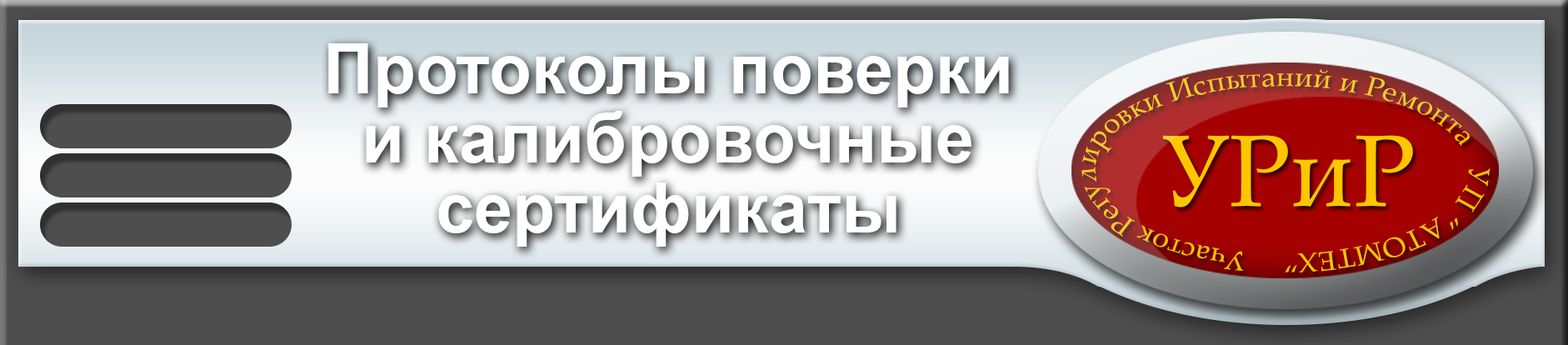
<style>
.page{position:relative;width:1568px;height:345px}
.page>*{position:absolute;margin:0}
.t1{font:69.4px/69.4px "Arial-BoldMT";color:#eaeff1}
.t2{font:27.1px "PalatinoLinotype-Roman";scale:1.09 1}
.t3{font:101.5px "PalatinoLinotype-Roman";color:#ffc600}
</style>
<div class="page">
<p class="t1" style="left:328px;top:43px;width:681px;height:204px;text-align:center">Протоколы поверки<br>и калибровочные<br>сертификаты</p>
<p class="t2" style="left:1081px;top:69px;width:410px;height:203px;text-align:center">Участок Регулировки Испытаний и Ремонта   УП “АТОМТЕХ”</p>
<p class="t3" style="left:1163px;top:135px;width:250px;height:72px">УРиР</p>
</div>
